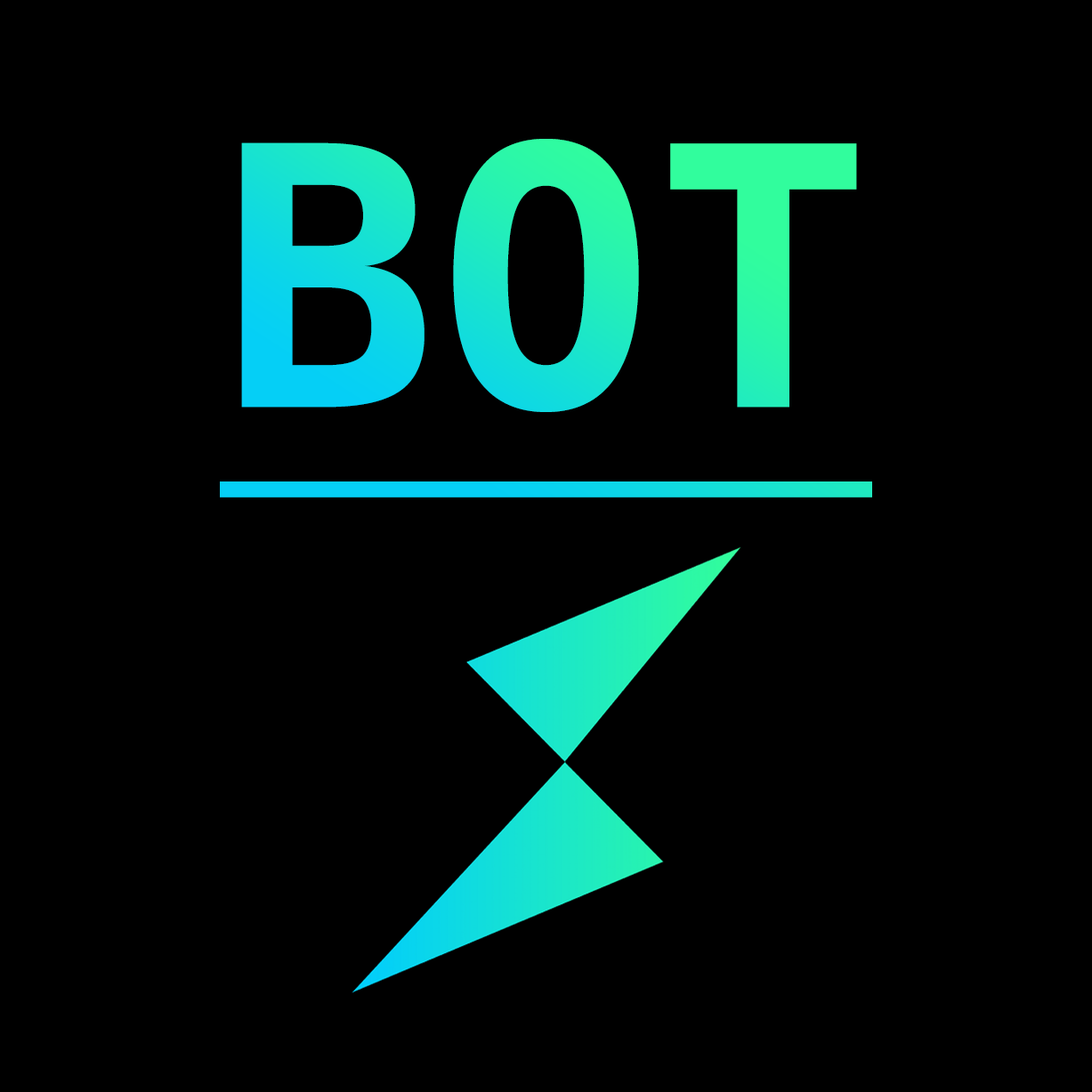
<style>
.page{position:relative;width:1092px;height:1092px;background:#000000}
.page>*{position:absolute;margin:0}
.t1{font:619.3px "Menlo-Bold";text-decoration:underline}
</style>
<div class="page">
<p class="t1" style="left:220px;top:139px;width:652px;height:358px">BOT</p>
</div>
